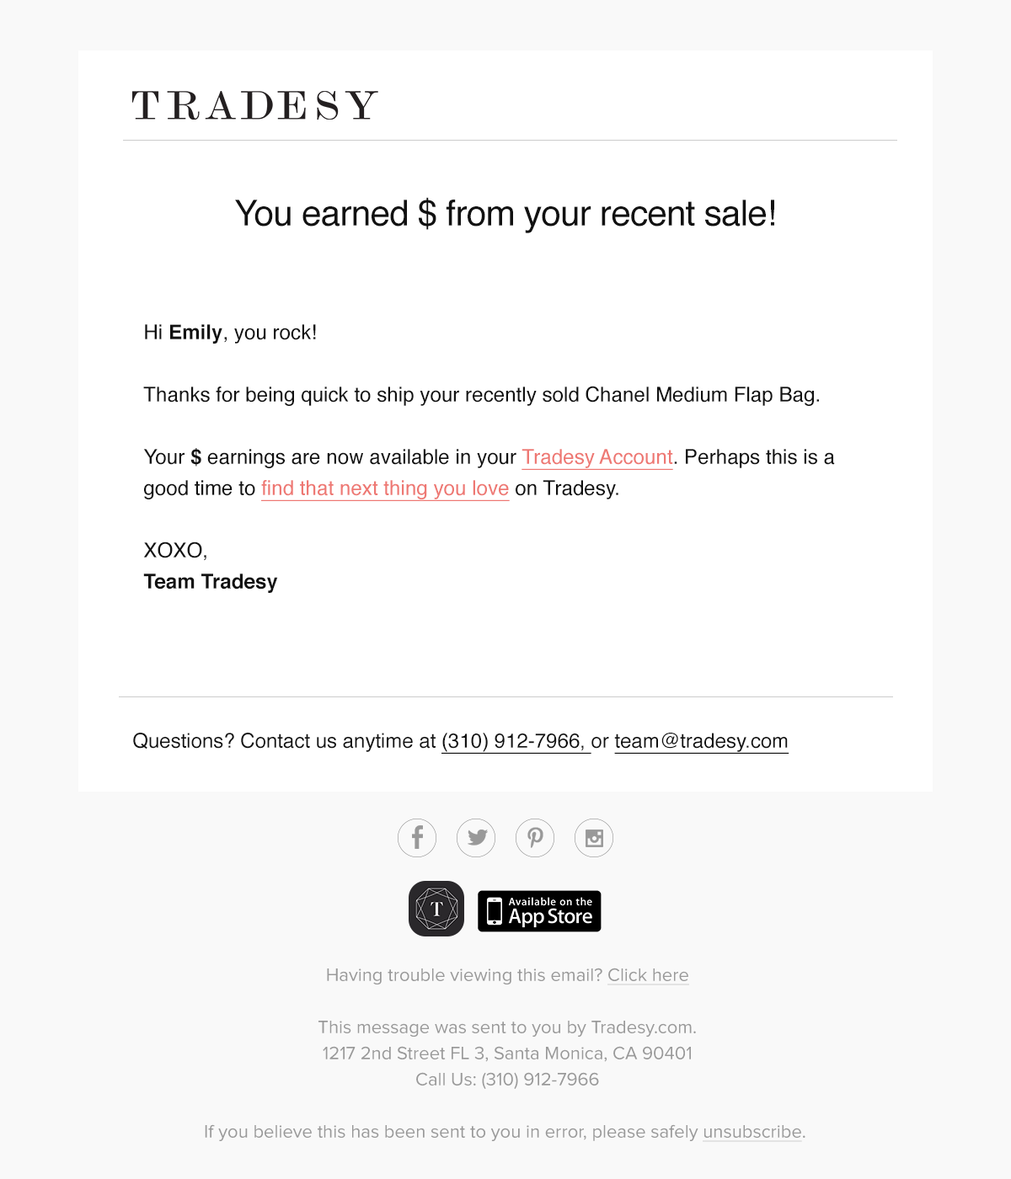
<style>
.page{position:relative;width:1011px;height:1179px;background:#ffffff}
.page>*{position:absolute;margin:0}
.t1{font:35.7px "Helvetica";letter-spacing:-0.02em;color:#111111}
.t2{font:20.4px/31.2px "Helvetica";color:#111111}
.t3{font:20.4px/31.2px "Helvetica-Bold";color:#111111}
.t4{font:20.4px/31.2px "Helvetica";color:#ee7873;text-decoration:underline}
.t5{font:20.2px "Helvetica";color:#111111}
.t6{font:20.2px "Helvetica";color:#111111;text-decoration:underline}
.t7{font:18.5px/26.1px "ProximaNova-Regular";color:#999999}
.t8{font:18.5px/26.1px "ProximaNova-Regular";color:#999999;text-decoration:underline}
</style>
<div class="page">
<p class="t1" style="left:235px;top:197px;width:539px;height:36px">You earned $ from your recent sale!</p>
<p class="t2" style="left:143px;top:324px;width:692px;height:269px">Hi <span class="t3">Emily</span>, you rock!<br><br>Thanks for being quick to ship your recently sold Chanel Medium Flap Bag.<br><br>Your <span class="t3">$</span> earnings are now available in your <span class="t4">Tradesy Account</span>. Perhaps this is a good time to <span class="t4">find that next thing you love</span> on Tradesy.<br><br>XOXO,<br><span class="t3">Team Tradesy</span></p>
<p class="t5" style="left:133px;top:733px;width:656px;height:21px">Questions? Contact us anytime at <span class="t6">(310) 912-7966, </span>or <span class="t6">team@tradesy.com</span></p>
<p class="t7" style="left:205px;top:968px;width:600px;height:174px;text-align:center">Having trouble viewing this email? <span class="t8">Click here<br></span><br>This message was sent to you by Tradesy.com.<br>1217 2nd Street FL 3, Santa Monica, CA 90401<br>Call Us: (310) 912-7966<br><br>If you believe this has been sent to you in error, please safely <span class="t8">unsubscribe</span>.</p>
</div>
